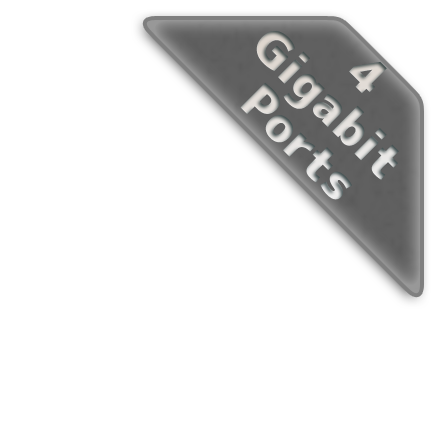
<style>
.page{position:relative;width:440px;height:440px;background:#ffffff}
.page>*{position:absolute;margin:0}
.t1{font:48px/48px "mplus-1p-black"}
</style>
<div class="page">
<p class="t1" style="left:240px;top:31px;width:159px;height:169px;text-align:center;rotate:45deg">4<br>Gigabit <br>Ports</p>
</div>
